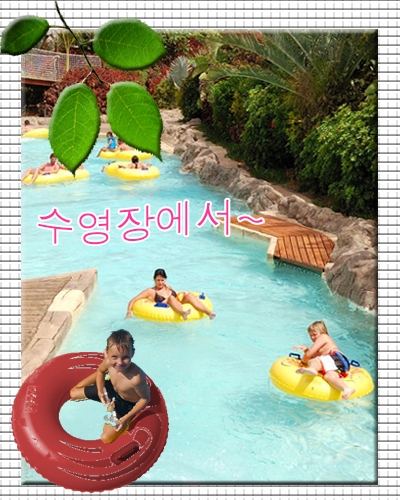
<style>
.page{position:relative;width:400px;height:500px}
.page>*{position:absolute;margin:0}
.t1{font:40px "Dotum";color:#ff3399}
</style>
<div class="page">
<p class="t1" style="left:38px;top:199px;width:226px;height:46px">수영장에서~</p>
</div>
